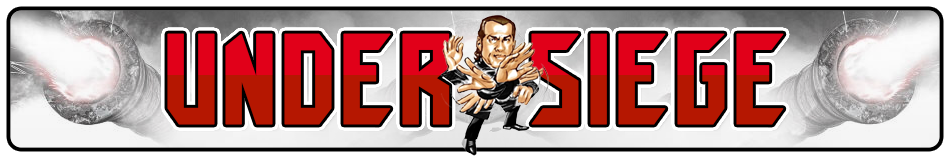
<style>
.page{position:relative;width:950px;height:158px}
.page>*{position:absolute;margin:0}
.t1{font:127.8px "NFLTampaBayBuccaneers";text-transform:uppercase;font-weight:bold}
</style>
<div class="page">
<p class="t1" style="left:167px;top:33px;width:617px;height:92px">Under  Siege</p>
<p class="t1" style="left:167px;top:33px;width:617px;height:92px">Under  Siege</p>
<p class="t1" style="left:167px;top:33px;width:617px;height:92px">Under  Siege</p>
</div>
